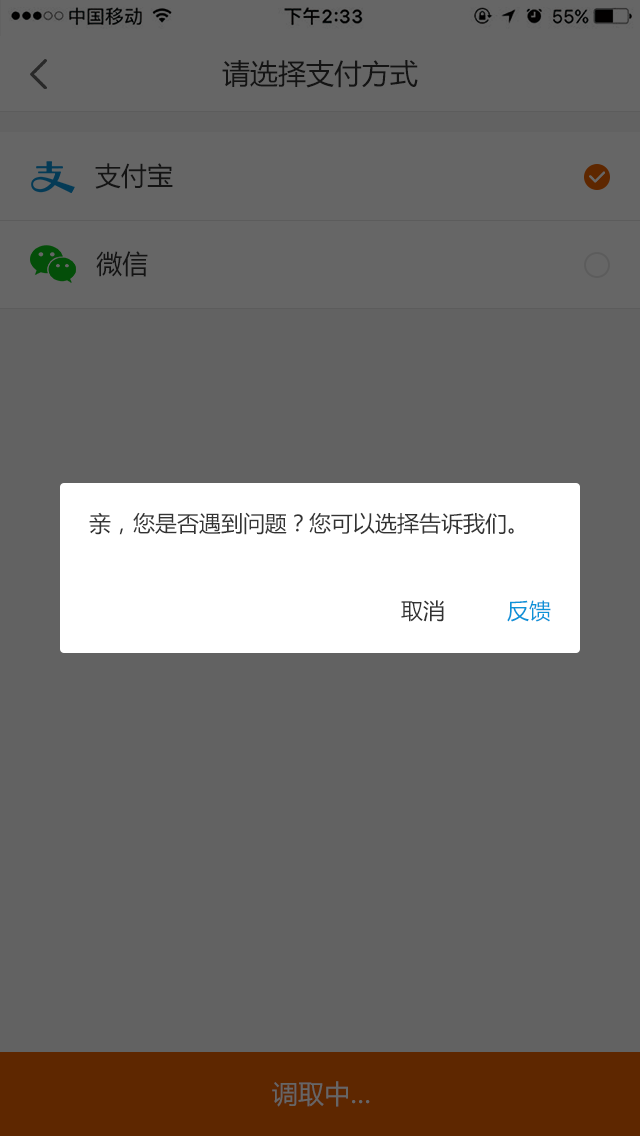
<style>
.page{position:relative;width:640px;height:1136px;background:#626262}
.page>*{position:absolute;margin:0}
.t1{font:28px "MicrosoftYaHei";color:#141414}
.t2{font:26px "MicrosoftYaHei";color:#141414}
.t3{font:22px "MicrosoftYaHei";color:#333333}
.t4{font:22px "MicrosoftYaHei";color:#0d93d8}
.t5{font:26px "MicrosoftYaHei";color:#666666}
</style>
<div class="page">
<p class="t1" style="left:222px;top:60px;width:196px;height:28px">请选择支付方式</p>
<p class="t2" style="left:95px;top:163px;width:78px;height:26px">支付宝</p>
<p class="t2" style="left:96px;top:251px;width:52px;height:26px">微信</p>
<p class="t3" style="left:89px;top:512px;width:425px;height:23px">亲，您是否遇到问题？您可以选择告诉我们。</p>
<p class="t3" style="left:401px;top:600px;width:43px;height:22px">取消</p>
<p class="t4" style="left:507px;top:600px;width:44px;height:22px">反馈</p>
<p class="t5" style="left:272px;top:1081px;width:98px;height:26px">调取中…</p>
</div>
